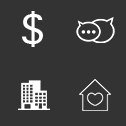
<style>
.page{position:relative;width:126px;height:126px;background:#333333}
.page>*{position:absolute;margin:0}
.t1{font:39.9px "Sathu";letter-spacing:0.06em;color:#ffffff;scale:1.03 1}
</style>
<div class="page">
<p class="t1" style="left:22px;top:11px;width:21px;height:36px">$</p>
</div>
